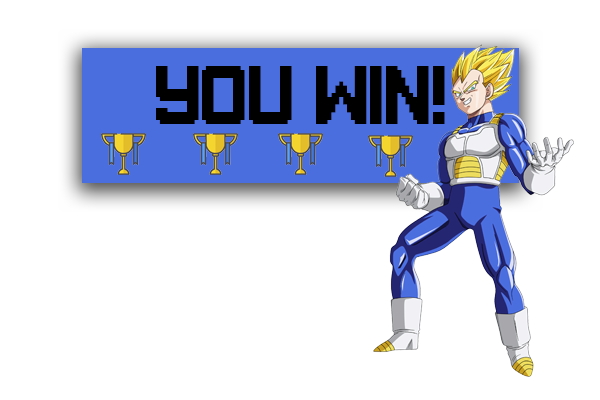
<style>
.page{position:relative;width:600px;height:400px;background:#ffffff}
.page>*{position:absolute;margin:0}
.t1{font:62.5px "Gameplay";color:#000000}
</style>
<div class="page">
<p class="t1" style="left:156px;top:66px;width:289px;height:58px">you win!</p>
</div>
